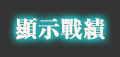
<style>
.page{position:relative;width:120px;height:57px;background:#333333}
.page>*{position:absolute;margin:0}
.t1{font:22px "RyuminPr6N-ExBold";color:#fff6f2;font-weight:bold}
</style>
<div class="page">
<p class="t1" style="left:15px;top:18px;width:90px;height:22px">顯示戰績</p>
</div>
